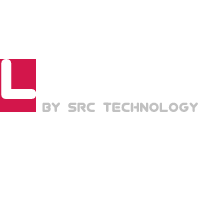
<style>
.page{position:relative;width:200px;height:200px;background:#ffffff}
.page>*{position:absolute;margin:0}
.t1{font:64px "Virgo01";color:#ffffff}
.t2{font:15px "Virgo01";color:#c1c1c1}
</style>
<div class="page">
<p class="t1" style="left:1px;top:58px;width:198px;height:42px">LearN</p>
<p class="t2" style="left:42px;top:102px;width:156px;height:11px">by src Technology</p>
</div>
